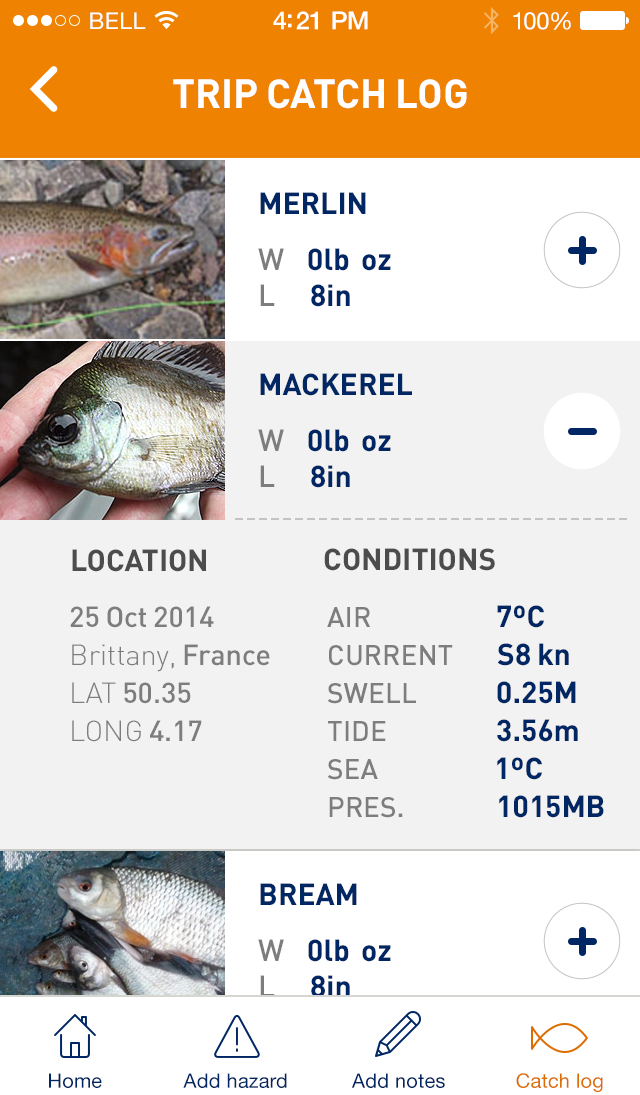
<style>
.page{position:relative;width:640px;height:1095px;background:#f2f2f2}
.page>*{position:absolute;margin:0}
.t1{font:23px "HelveticaNeue";letter-spacing:0.02em;color:#ffffff}
.t2{font:25px "HelveticaNeue-Medium";letter-spacing:-0.02em;color:#ffffff}
.t3{font:24px "HelveticaNeue";letter-spacing:-0.02em;color:#ffffff}
.t4{font:40px "DIN-Bold";color:#ffffff;text-transform:uppercase}
.t5{font:30px "DIN-Bold";color:#002663}
.t6{font:30px "DIN-Bold";color:#002663;text-transform:uppercase}
.t7{font:30px "DIN-Medium";color:#7d7d7d}
.t8{font:30px "DIN-Bold";color:#4c4c4c;text-transform:uppercase}
.t9{font:28.7px/38px "DIN-Medium";color:#7d7d7d}
.t10{font:28.7px/38px "DIN-Light";color:#7d7d7d}
.t11{font:28px/38px "DIN-Medium";color:#7d7d7d}
.t12{font:20px "HelveticaNeue";letter-spacing:0.01em;color:#002663}
.t13{font:20px "HelveticaNeue";letter-spacing:0.01em;color:#dd6d00}
</style>
<div class="page">
<p class="t1" style="left:90px;top:12px;width:56px;height:17px">BELL</p>
<p class="t2" style="left:273px;top:11px;width:95px;height:19px">4:21 PM</p>
<p class="t3" style="left:513px;top:12px;width:58px;height:18px">100%</p>
<p class="t4" style="left:173px;top:79px;width:294px;height:30px">trip catch log</p>
<p class="t5" style="left:258px;top:192px;width:133px;height:115px"><span class="t6">Merlin<br></span><span class="t7">W    </span>0lb  oz<br><span class="t7">L      </span>8in</p>
<p class="t6" style="left:258px;top:373px;width:154px;height:115px">mackerEl<br><span class="t7">W    </span><span class="t5">0lb  oz<br></span><span class="t7">L      </span><span class="t5">8in</span></p>
<p class="t8" style="left:72px;top:549px;width:134px;height:23px">location</p>
<p class="t8" style="left:324px;top:548px;width:171px;height:23px">conditions</p>
<p class="t9" style="left:70px;top:606px;width:200px;height:136px">25 Oct 2014<br><span class="t10">Brittany, </span>France<br><span class="t10">LAT </span>50.35<span class="t10"><br>LONG </span>4.17</p>
<p class="t5" style="left:497px;top:605px;width:47px;height:23px">7ºC</p>
<p class="t11" style="left:327px;top:607px;width:126px;height:211px">AIR<br>CURRENT<br>SWELL<br>TIDE<br>SEA<br>PRES.</p>
<p class="t5" style="left:497px;top:643px;width:72px;height:23px">S8 kn</p>
<p class="t5" style="left:497px;top:681px;width:79px;height:23px">0.25M</p>
<p class="t5" style="left:497px;top:719px;width:81px;height:23px">3.56m</p>
<p class="t5" style="left:497px;top:757px;width:45px;height:23px">1ºC</p>
<p class="t5" style="left:499px;top:795px;width:105px;height:23px">1015MB</p>
<p class="t5" style="left:258px;top:883px;width:133px;height:115px"><span class="t6">bream<br></span><span class="t7">W    </span>0lb  oz<br><span class="t7">L      </span>8in</p>
<p class="t12" style="left:49px;top:1073px;width:53px;height:15px">Home</p>
<p class="t12" style="left:183px;top:1073px;width:104px;height:15px">Add hazard</p>
<p class="t12" style="left:352px;top:1073px;width:93px;height:15px">Add notes</p>
<p class="t13" style="left:516px;top:1073px;width:87px;height:19px">Catch log</p>
</div>
